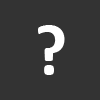
<style>
.page{position:relative;width:100px;height:100px;background:#333333}
.page>*{position:absolute;margin:0}
.t1{font:72px "Calibri-Bold";color:#ffffff}
</style>
<div class="page">
<p class="t1" style="left:38px;top:25px;width:27px;height:50px">?</p>
</div>
